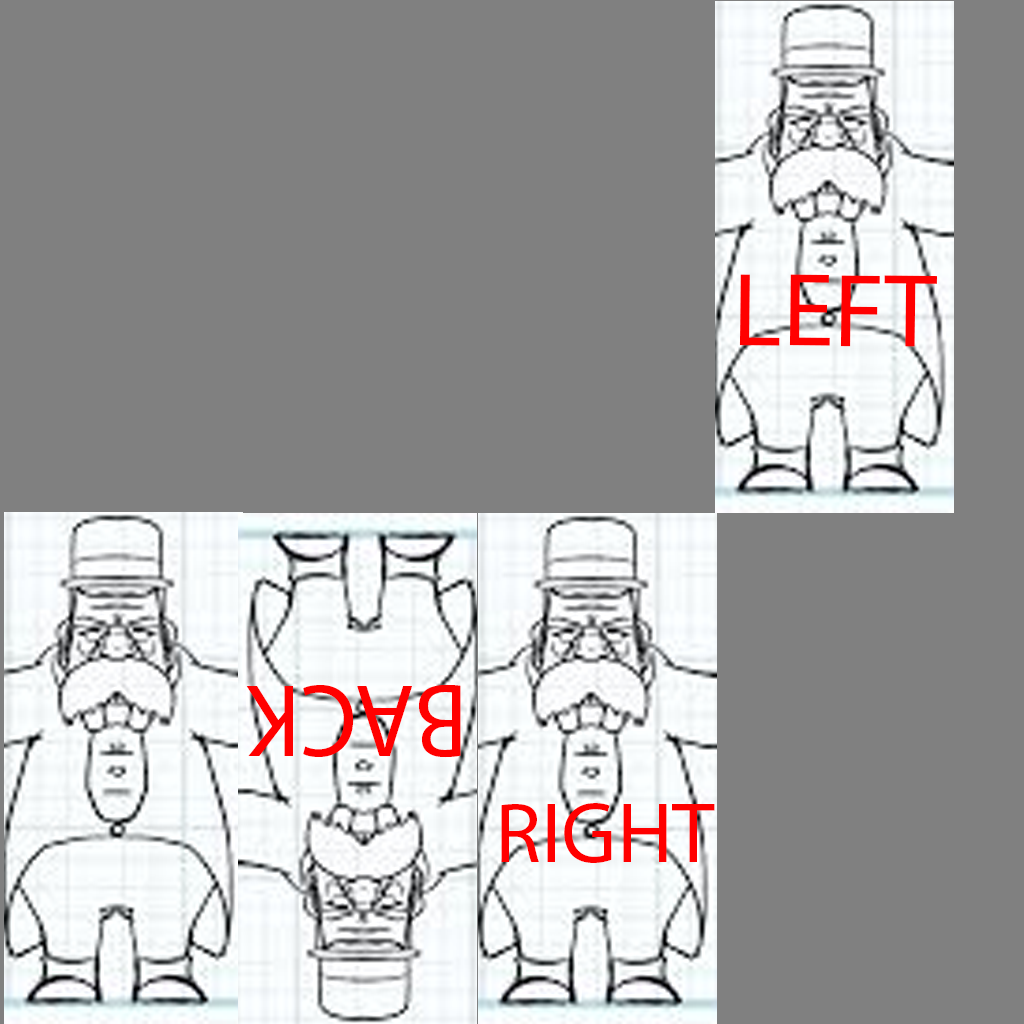
<style>
.page{position:relative;width:1024px;height:1024px;background:#808080}
.page>*{position:absolute;margin:0}
.t1{font:104.6px "MyriadPro-Regular";color:#ff0000}
.t2{font:104px "MyriadPro-Regular";color:#ff0000;scale:0.93 1}
.t3{font:86.5px "MyriadPro-Regular";color:#ff0000}
</style>
<div class="page">
<p class="t1" style="left:739px;top:274px;width:198px;height:73px;rotate:1deg">LEFT</p>
<p class="t2" style="left:246px;top:684px;width:215px;height:74px;rotate:180deg">BACK</p>
<p class="t3" style="left:501px;top:803px;width:214px;height:60px">RIGHT</p>
</div>
